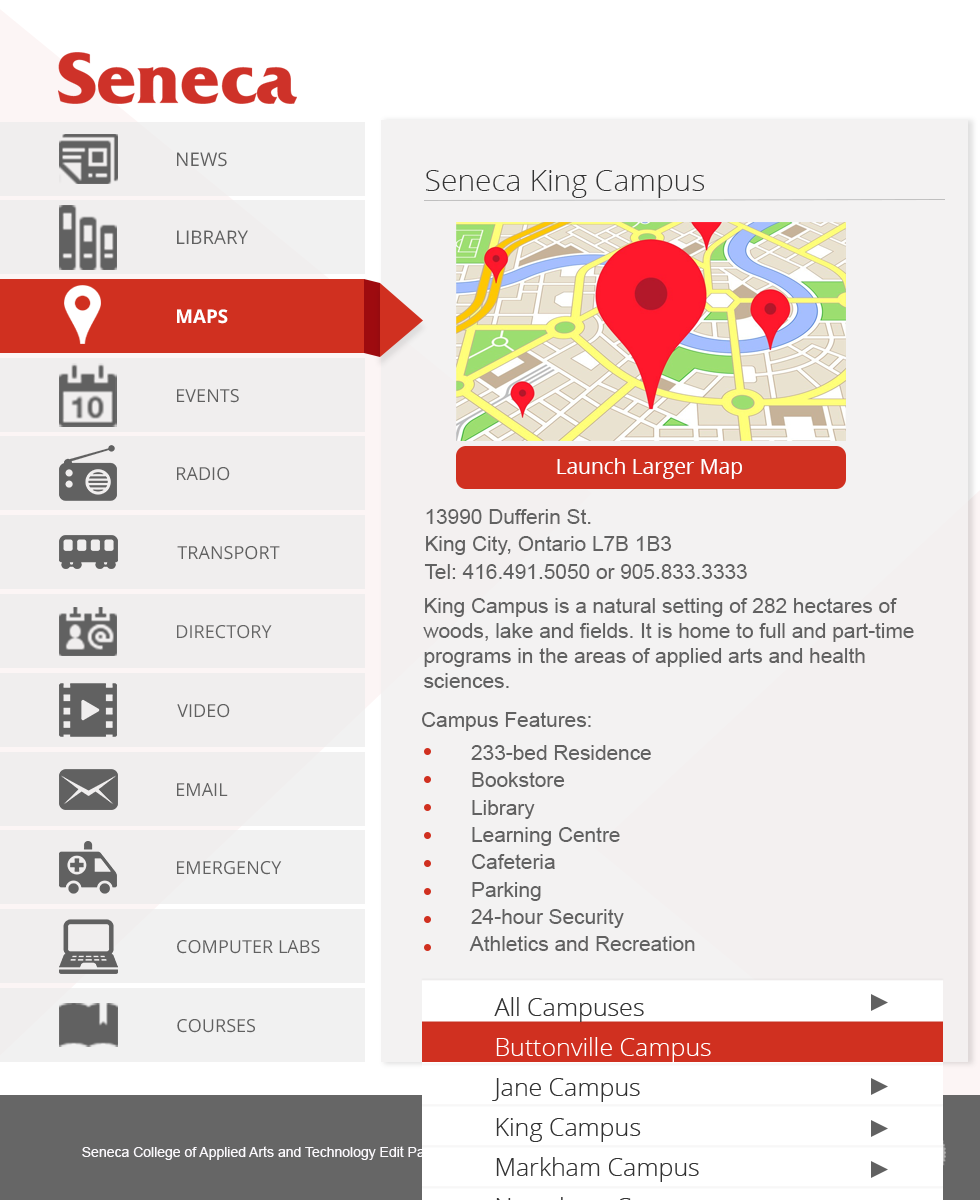
<style>
.page{position:relative;width:980px;height:1200px;background:#f3f2f2}
.page>*{position:absolute;margin:0}
.t1{font:30px "OpenSans-Light";color:#333333}
.t2{font:20.8px "OpenSans";color:#ffffff}
.t3{font:20.8px/25px "ArialMT";color:#616161}
.t4{font:20.8px "ArialMT";color:#616161}
</style>
<div class="page">
<p class="t1" style="left:426px;top:170px;width:279px;height:28px">Seneca King Campus</p>
<p class="t2" style="left:557px;top:458px;width:185px;height:21px">Launch Larger Map</p>
<p class="t3" style="left:424px;top:509px;width:323px;height:70px">13990 Dufferin St.<br>King City, Ontario L7B 1B3<br>Tel: 416.491.5050 or 905.833.3333</p>
<p class="t3" style="left:423px;top:598px;width:491px;height:90px">King Campus is a natural setting of 282 hectares of woods, lake and fields. It is home to full and part-time programs in the areas of applied arts and health sciences.</p>
<p class="t4" style="left:422px;top:712px;width:169px;height:19px">Campus Features:</p>
<p class="t3" style="left:469px;top:745px;width:226px;height:206px">233-bed Residence<br>   Bookstore<br>   Library<br>   Learning Centre<br>   Cafeteria<br>   Parking<br>   24-hour Security<br>   Athletics and Recreation</p>
</div>
